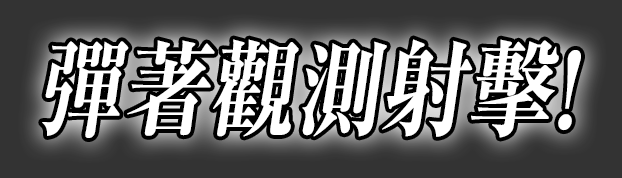
<style>
.page{position:relative;width:622px;height:178px;background:#333333}
.page>*{position:absolute;margin:0}
.t1{font:104px "RyuminPr6N-ExBold";color:#ffffff;font-style:italic;scale:0.83 1}
</style>
<div class="page">
<p class="t1" style="left:42px;top:39px;width:539px;height:99px">彈著觀測射擊!</p>
</div>
